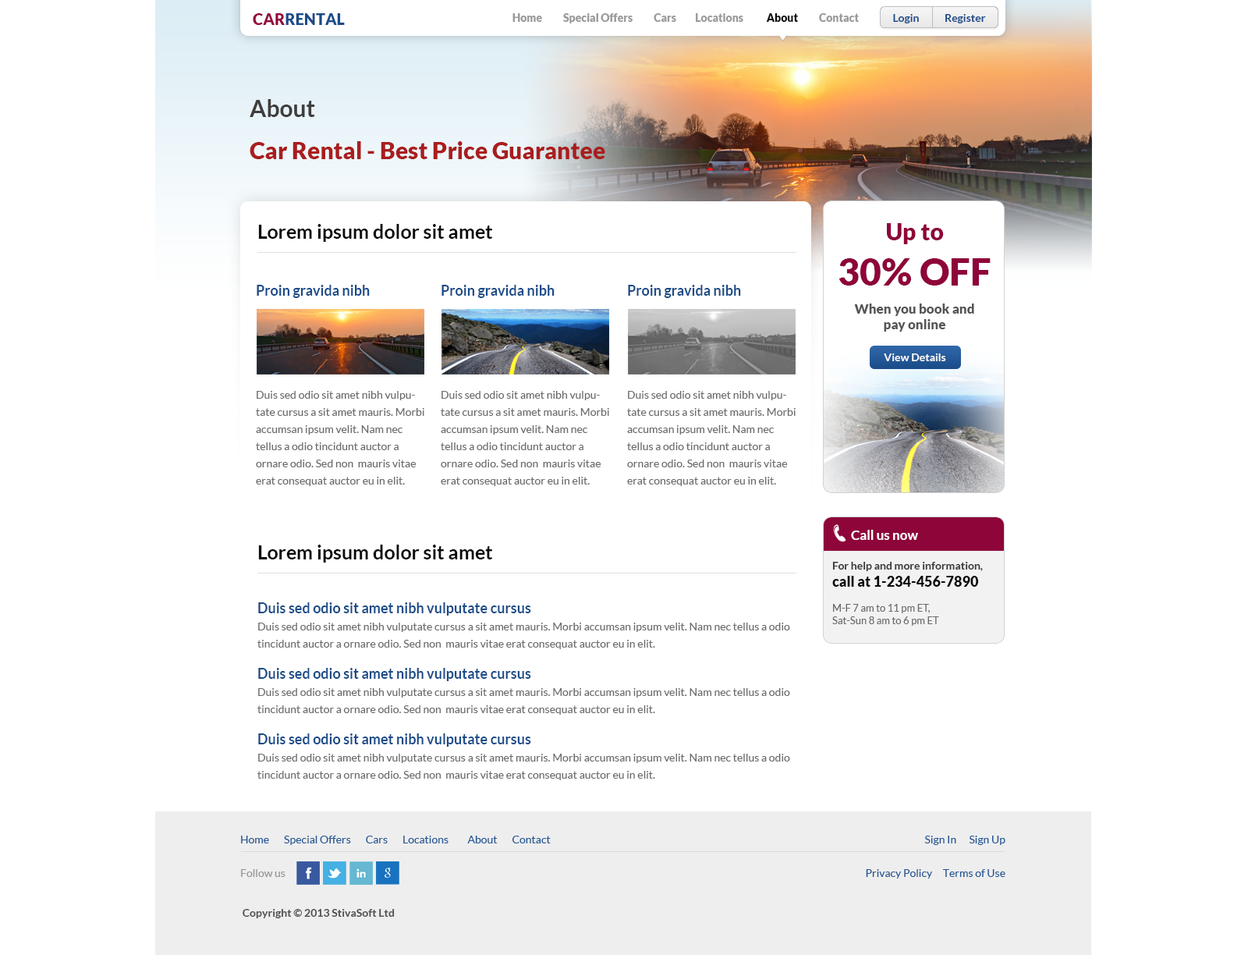
<style>
.page{position:relative;width:1248px;height:955px;background:#ffffff}
.page>*{position:absolute;margin:0}
.t1{font:15.6px "Lato-Black";color:#1a4c89;text-transform:uppercase}
.t2{font:15.6px "Lato-Black";color:#95033b;text-transform:uppercase}
.t3{font:10.9px "Lato-Black";color:#9a9a9a}
.t4{font:10.9px "Lato-Black";color:#0a0a0a}
.t5{font:11px "Lato-Bold";color:#1a4c89}
.t6{font:23.4px/14px "Lato-Black";color:#aa1d1e}
.t7{font:23.4px/14px "Lato-Bold";color:#3f3d3d}
.t8{font:19.5px "Lato-Bold";color:#0a0a0a}
.t9{font:13.3px/14px "Lato-Black";color:#555454}
.t10{font:23.4px "Lato-Black";color:#8e053a}
.t11{font:37.5px "Lato-Black";color:#8e053a;text-transform:uppercase}
.t12{font:13.3px "Lato-Black";color:#555454}
.t13{font:10.9px/17.2px "Lato-Regular";color:#6d6b6b}
.t14{font:14px/14px "Lato-Bold";color:#1a4c89}
.t15{font:10.9px/18.7px "Lato-Regular";color:#6d6b6b}
.t16{font:10.9px "Lato-Bold";color:#f7f6f6}
.t17{font:13.3px "Lato-Bold";color:#ffffff}
.t18{font:10.1px "Lato-Regular";color:#6d6a6a}
.t19{font:10.9px "Lato-Bold";color:#393737}
.t20{font:14px "Lato-Black";color:#0a0a0a}
.t21{font:10.9px "Lato-Regular";color:#225695}
.t22{font:10.9px "Lato-Regular";color:#949698}
.t23{font:10.9px "Lato-Bold";color:#4f5050}
</style>
<div class="page">
<p class="t1" style="left:253px;top:13px;width:92px;height:12px"><span class="t2">car</span>rental</p>
<p class="t3" style="left:513px;top:13px;width:346px;height:10px">Home          Special Offers          Cars         Locations          <span class="t4"> About </span>         Contact</p>
<p class="t5" style="left:893px;top:14px;width:93px;height:9px">Login            Register</p>
<p class="t6" style="left:250px;top:99px;width:356px;height:60px"><span class="t7">About<br><br><br></span>Car Rental - Best Price Guarantee</p>
<p class="t8" style="left:258px;top:224px;width:235px;height:18px">Lorem ipsum dolor sit amet</p>
<p class="t9" style="left:839px;top:223px;width:152px;height:109px;text-align:center"><span class="t10">Up to <br></span><span class="t11">30% off<br><br></span>When you book and <br><span class="t12">pay online</span></p>
<p class="t13" style="left:627px;top:285px;width:169px;height:201px"><span class="t14">Proin gravida nibh<br><br><br><br><br><br><br></span><span class="t15">Duis sed odio sit amet nibh v</span>ulputate cursus a sit amet mauris. Morbi accumsan ipsum velit. Nam nec tellus a odio tincidunt auctor a ornare odio. Sed non  mauris vitae erat consequat auctor eu in elit.</p>
<p class="t16" style="left:884px;top:353px;width:63px;height:8px">View Details</p>
<p class="t17" style="left:851px;top:530px;width:67px;height:10px">Call us now</p>
<p class="t8" style="left:258px;top:545px;width:235px;height:18px">Lorem ipsum dolor sit amet</p>
<p class="t18" style="left:833px;top:562px;width:150px;height:64px"><span class="t19">For help and more information, <br></span><span class="t20">call at 1-234-456-7890<br><br></span>M-F 7 am to 11 pm ET,<br>Sat-Sun 8 am to 6 pm ET</p>
<p class="t13" style="left:258px;top:602px;width:532px;height:178px"><span class="t14">Duis sed odio sit amet nibh vulputate cursus <br></span>Duis sed odio sit amet nibh vulputate cursus a sit amet mauris. Morbi accumsan ipsum velit. Nam nec tellus a odio tincidunt auctor a ornare odio. Sed non  mauris vitae erat consequat auctor eu in elit. <br><br><span class="t14">Duis sed odio sit amet nibh vulputate cursus <br></span>Duis sed odio sit amet nibh vulputate cursus a sit amet mauris. Morbi accumsan ipsum velit. Nam nec tellus a odio tincidunt auctor a ornare odio. Sed non  mauris vitae erat consequat auctor eu in elit. <br><br><span class="t14">Duis sed odio sit amet nibh vulputate cursus <br></span>Duis sed odio sit amet nibh vulputate cursus a sit amet mauris. Morbi accumsan ipsum velit. Nam nec tellus a odio tincidunt auctor a ornare odio. Sed non  mauris vitae erat consequat auctor eu in elit.</p>
<p class="t21" style="left:241px;top:836px;width:310px;height:9px">Home       Special Offers       Cars       Locations         About       Contact</p>
<p class="t21" style="left:925px;top:836px;width:81px;height:9px">Sign In      Sign Up</p>
<p class="t22" style="left:241px;top:869px;width:45px;height:8px">Follow us</p>
<p class="t21" style="left:866px;top:869px;width:140px;height:10px">Privacy Policy     Terms of Use</p>
<p class="t23" style="left:243px;top:909px;width:152px;height:9px">Copyright © 2013 StivaSoft Ltd</p>
</div>
